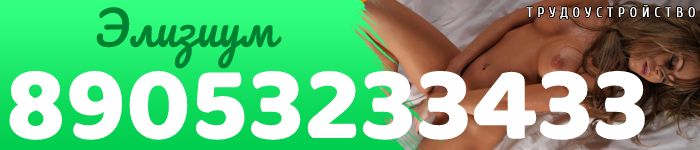
<style>
.page{position:relative;width:700px;height:150px;background:#ffffff}
.page>*{position:absolute;margin:0}
.t1{font:14px "Cuprum-Regular";letter-spacing:0.321em;color:#ffffff;text-transform:uppercase;font-weight:bold}
.t2{font:47px "Pacifico-Regular";color:#008031}
.t3{font:107.6px "Baloo";color:#ffffff}
</style>
<div class="page">
<p class="t1" style="left:526px;top:4px;width:169px;height:15px">трудоустройство</p>
<p class="t2" style="left:96px;top:7px;width:186px;height:62px">Элизиум</p>
<p class="t3" style="left:9px;top:70px;width:636px;height:70px">89053233433</p>
</div>
